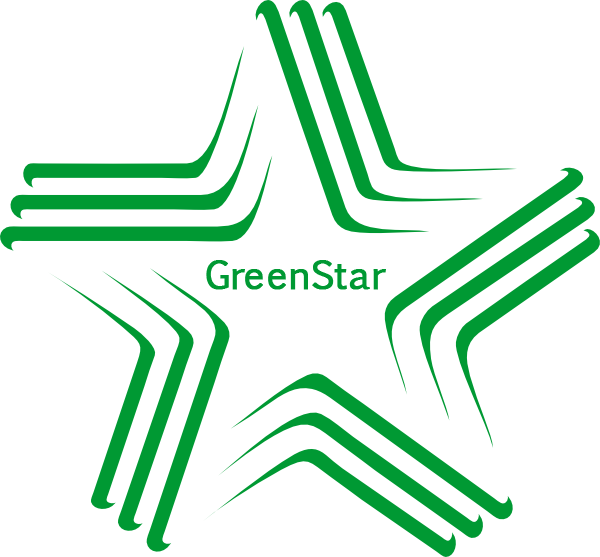
<style>
.page{position:relative;width:600px;height:557px;background:#ffffff}
.page>*{position:absolute;margin:0}
.t1{font:38.3px "EuphemiaCAS";color:#009933;font-weight:bold}
</style>
<div class="page">
<p class="t1" style="left:206px;top:260px;width:180px;height:30px">GreenStar</p>
</div>
